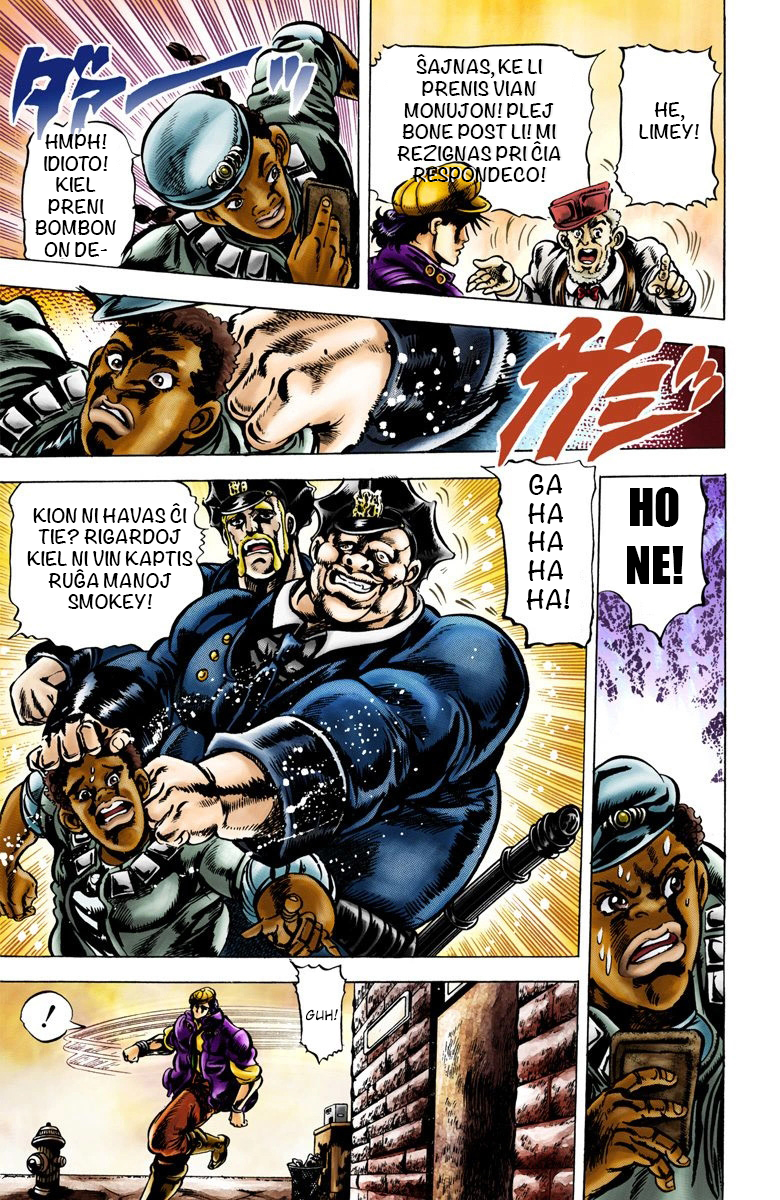
<style>
.page{position:relative;width:780px;height:1200px}
.page>*{position:absolute;margin:0}
.t1{font:18px "Noteworthy-Bold";color:#000000}
.t2{font:24px "Noteworthy-Bold";color:#000000}
.t3{font:48px "Impact";color:#000000}
</style>
<div class="page">
<p class="t1" style="left:397px;top:54px;width:164px;height:128px;text-align:center">ŜAJNAS, KE LI PRENIS VIAN MONUJON! PLEJ BONE POST LI! MI REZIGNAS PRI ĈIA RESPONDECO!</p>
<p class="t1" style="left:639px;top:102px;width:60px;height:37px;text-align:center">HE, LIMEY!</p>
<p class="t1" style="left:35px;top:134px;width:81px;height:123px;text-align:center">HMPH! IDIOTO! KIEL PRENI BOMBONON DE-</p>
<p class="t2" style="left:526px;top:474px;width:44px;height:136px;text-align:center">GA <br>HA <br>HA <br>HA <br> HA!</p>
<p class="t3" style="left:627px;top:487px;width:57px;height:97px;text-align:center">HO NE!</p>
<p class="t1" style="left:27px;top:503px;width:166px;height:106px;text-align:center">KION NI HAVAS ĈI TIE? RIGARDOJ KIEL NI VIN KAPTIS RUĜA MANOJ SMOKEY!</p>
</div>
